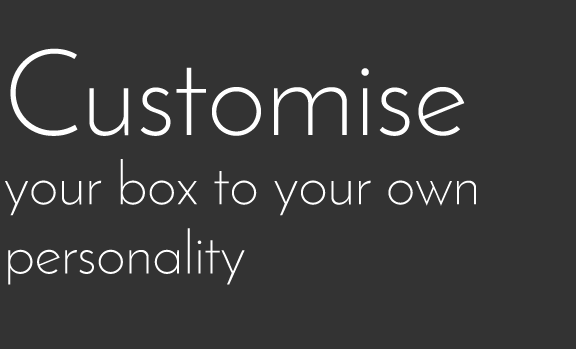
<style>
.page{position:relative;width:576px;height:349px;background:#333333}
.page>*{position:absolute;margin:0}
.t1{font:59.7px/69.3px "JosefinSans-Light";color:#ffffff}
.t2{font:120.3px/69.3px "JosefinSans-Light";color:#ffffff}
</style>
<div class="page">
<p class="t1" style="left:5px;top:48px;width:471px;height:237px"><span class="t2">Customise<br></span>your box to your own<br>personality</p>
</div>
